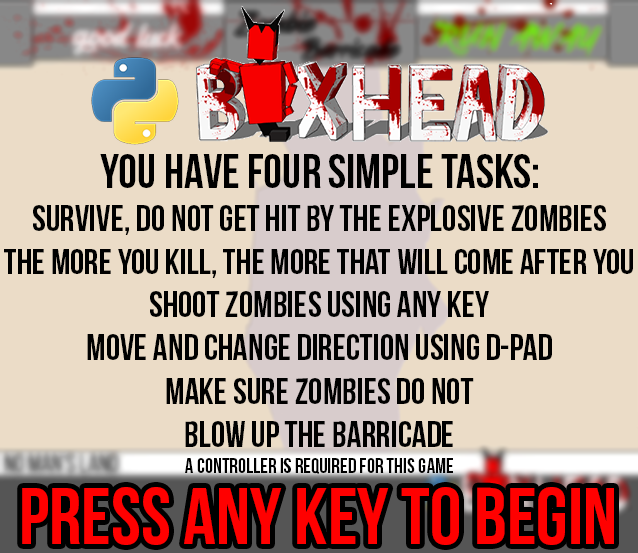
<style>
.page{position:relative;width:638px;height:553px;background:#ebdcc7}
.page>*{position:absolute;margin:0}
.t1{font:48px "BebasNeueBold";color:#000000}
.t2{font:36.1px "BebasNeueBold";color:#000000}
.t3{font:35.7px "BebasNeueBold";color:#000000}
.t4{font:20.9px "BebasNeueBold";color:#000000}
.t5{font:80.3px "BebasNeueBold";color:#ff0000}
</style>
<div class="page">
<p class="t1" style="left:100px;top:154px;width:438px;height:34px">you have four simple tasks:</p>
<p class="t2" style="left:4px;top:205px;width:629px;height:242px;text-align:center">survive, do not get hit by the explosive zombies<br><span class="t3">the more you kill, the more that will come after you<br></span>shoot zombies using any key<br>move and change direction using d-pad<br>make sure zombies do not<br>blow up the barricade</p>
<p class="t4" style="left:185px;top:458px;width:268px;height:16px">a controller is required for this game</p>
<p class="t5" style="left:22px;top:487px;width:592px;height:58px">press any key to begin</p>
</div>
